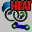
<style>
.page{position:relative;width:32px;height:32px;background:#c1c1c1}
.page>*{position:absolute;margin:0}
.t1{font:12px "MyriadPro-BoldCond";color:#f60b0b}
</style>
<div class="page">
<p class="t1" style="left:11px;top:1px;width:21px;height:9px">HEAT</p>
</div>
